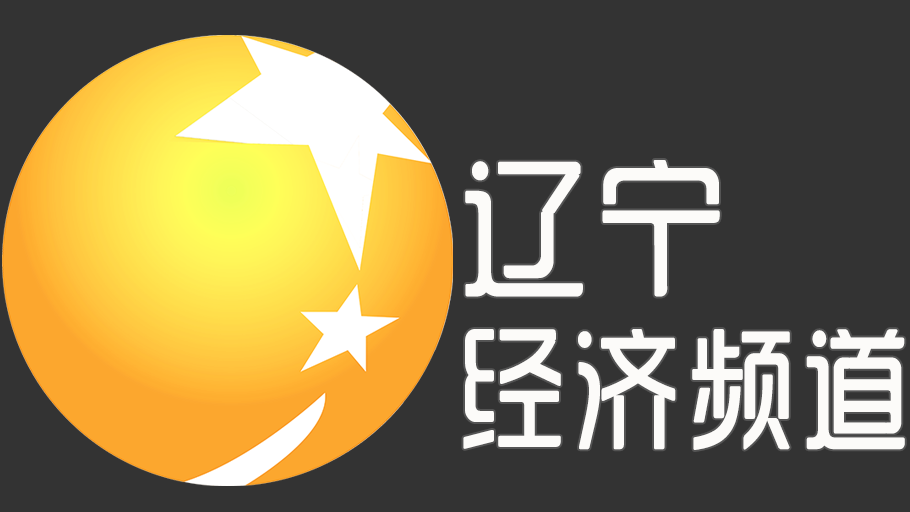
<style>
.page{position:relative;width:910px;height:512px;background:#333333}
.page>*{position:absolute;margin:0}
.t1{font:132px/170px "SJyunlvyuan";letter-spacing:0.02em;color:#fcfbf9;scale:0.85 1}
.t2{font:150px/170px "SJyunlvyuan";letter-spacing:0.02em;color:#fcfbf9;scale:0.9 1}
</style>
<div class="page">
<p class="t1" style="left:463px;top:160px;width:442px;height:290px"><span class="t2">辽宁<br></span>经济频道</p>
</div>
